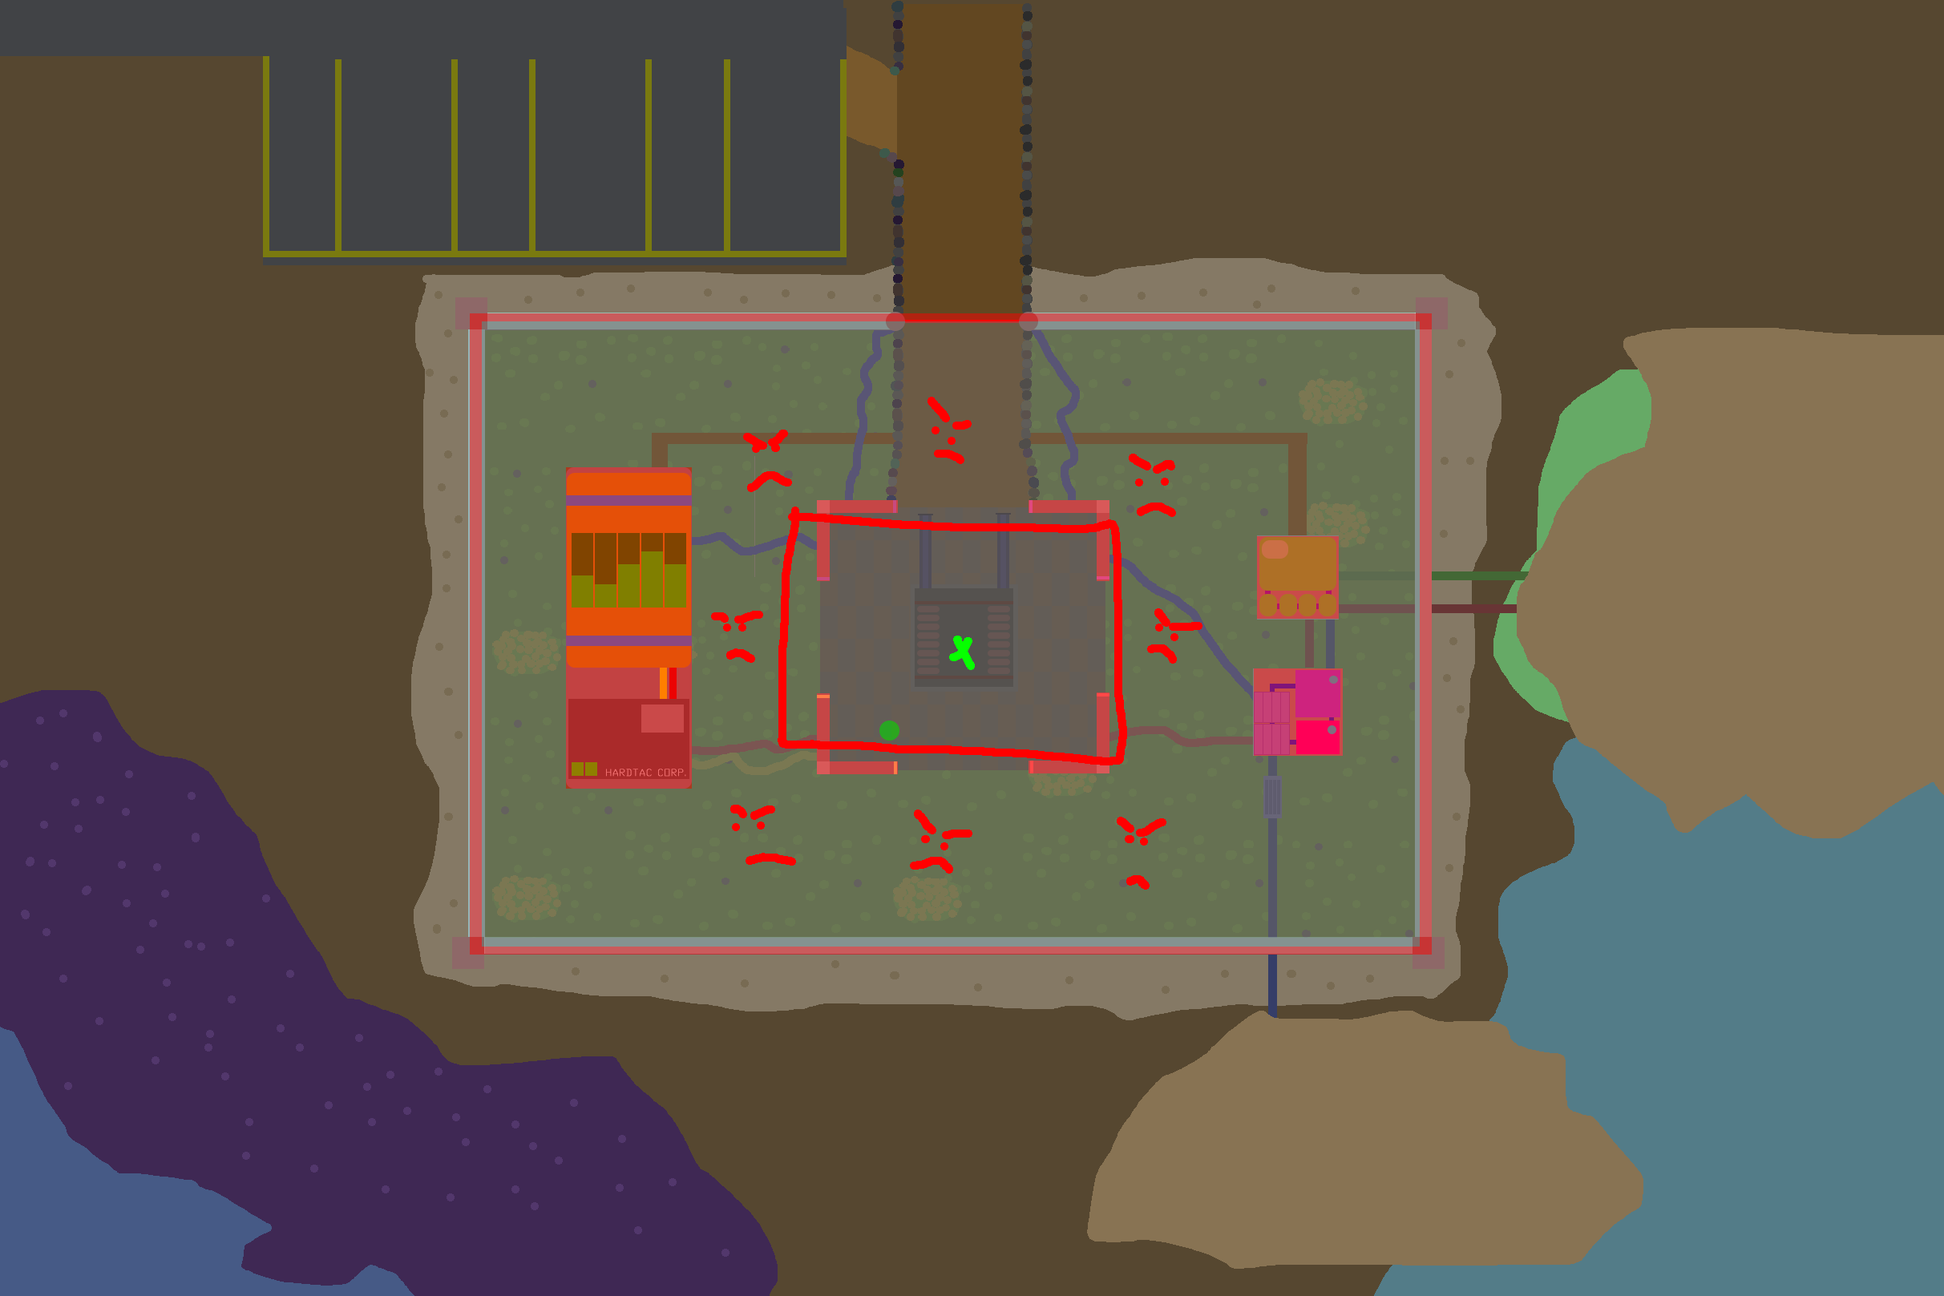
<style>
.page{position:relative;width:1944px;height:1296px;background:#564730}
.page>*{position:absolute;margin:0}
.t1{font:9px "Proxy1";font-weight:bold}
</style>
<div class="page">
<p class="t1" style="left:606px;top:769px;width:80px;height:8px">HARDTAC CORP.</p>
</div>
